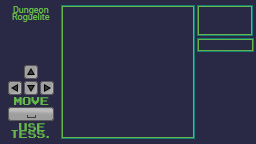
<style>
.page{position:relative;width:256px;height:144px;background:#292945}
.page>*{position:absolute;margin:0}
.t1{font:9px "Roboto-Regular";color:#66b84a}
.t2{font:9px "ArcadeNormal";color:#66b84a}
</style>
<div class="page">
<p class="t1" style="left:12px;top:6px;width:38px;height:16px;text-align:center">Dungeon<br>Roguelite</p>
<p class="t2" style="left:14px;top:97px;width:35px;height:8px">move</p>
<p class="t2" style="left:11px;top:123px;width:38px;height:15px;text-align:center">use<br>tess.</p>
</div>
